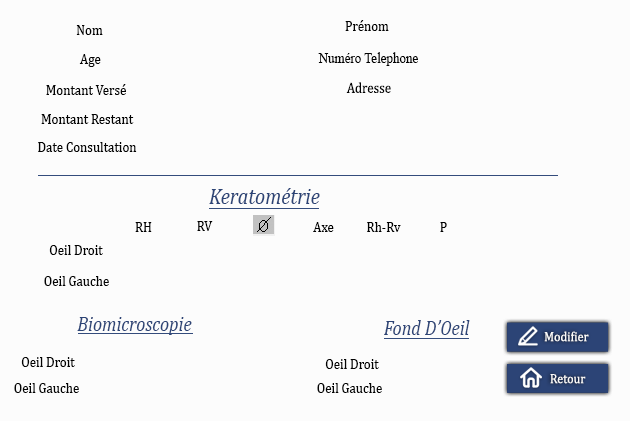
<style>
.page{position:relative;width:630px;height:421px;background:#fcfcfc}
.page>*{position:absolute;margin:0}
.t1{font:14.8px "Cambria";color:#000000;scale:0.88 1}
.t2{font:14.8px "Cambria";color:#030303;scale:0.88 1}
.t3{font:14.8px "TimesNewRomanPSMT";color:#030303;scale:0.88 1}
.t4{font:22.8px "Cambria-Italic";color:#2c4476;scale:0.88 1}
.t5{font:20.5px "Cambria-Italic";color:#2c4476;scale:0.88 1}
.t6{font:13.4px "Cambria";color:#fafafa;scale:0.9 1}
.t7{font:13.4px "Cambria";color:#e7e8ea;scale:0.9 1}
</style>
<div class="page">
<p class="t1" style="left:76px;top:25px;width:27px;height:10px">Nom</p>
<p class="t2" style="left:345px;top:20px;width:44px;height:11px">Prénom</p>
<p class="t2" style="left:79px;top:54px;width:22px;height:13px">Age</p>
<p class="t3" style="left:318px;top:52px;width:100px;height:14px">Numéro Telephone</p>
<p class="t2" style="left:46px;top:84px;width:80px;height:11px">Montant Versé</p>
<p class="t2" style="left:346px;top:82px;width:45px;height:11px">Adresse</p>
<p class="t2" style="left:41px;top:114px;width:93px;height:10px">Montant Restant</p>
<p class="t2" style="left:38px;top:142px;width:99px;height:10px">Date Consultation</p>
<p class="t4" style="left:209px;top:188px;width:111px;height:16px">Keratométrie</p>
<p class="t1" style="left:135px;top:222px;width:17px;height:10px">RH</p>
<p class="t1" style="left:197px;top:221px;width:16px;height:10px">RV</p>
<p class="t1" style="left:313px;top:222px;width:21px;height:10px">Axe</p>
<p class="t1" style="left:367px;top:222px;width:34px;height:10px">Rh-Rv</p>
<p class="t1" style="left:440px;top:222px;width:7px;height:10px">P</p>
<p class="t2" style="left:49px;top:245px;width:54px;height:10px">Oeil Droit</p>
<p class="t2" style="left:44px;top:276px;width:65px;height:10px">Oeil Gauche</p>
<p class="t5" style="left:77px;top:317px;width:115px;height:18px">Biomicroscopie</p>
<p class="t5" style="left:384px;top:320px;width:86px;height:15px">Fond D’Oeil</p>
<p class="t6" style="left:544px;top:331px;width:45px;height:11px">Modifier</p>
<p class="t7" style="left:546px;top:332px;width:40px;height:13px">Ajouter</p>
<p class="t2" style="left:21px;top:357px;width:54px;height:10px">Oeil Droit</p>
<p class="t2" style="left:325px;top:359px;width:54px;height:10px">Oeil Droit</p>
<p class="t6" style="left:550px;top:374px;width:36px;height:10px">Retour</p>
<p class="t2" style="left:14px;top:383px;width:65px;height:10px">Oeil Gauche</p>
<p class="t2" style="left:317px;top:383px;width:65px;height:10px">Oeil Gauche</p>
</div>
